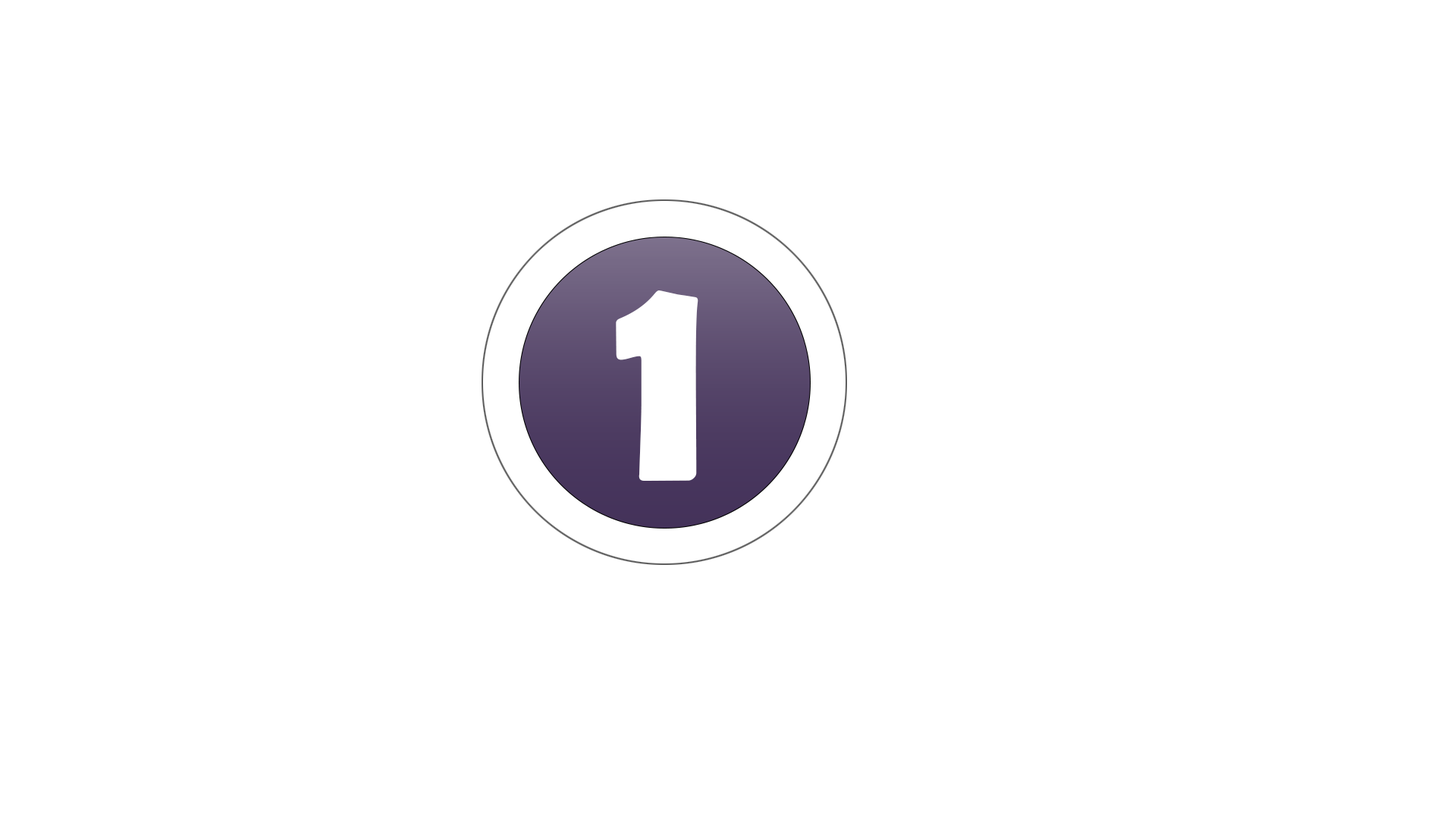
<style>
.page{position:relative;width:1456px;height:819px;background:#ffffff}
.page>*{position:absolute;margin:0}
.t1{font:309.2px "BerlinSansFBDemi-Bold";color:#ffffff}
</style>
<div class="page">
<p class="t1" style="left:616px;top:290px;width:82px;height:191px">1</p>
</div>
